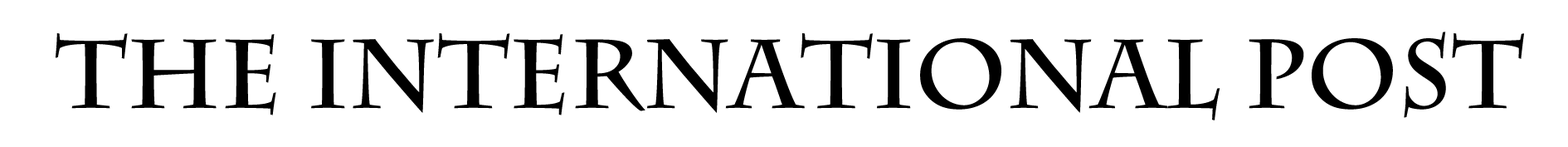
<style>
.page{position:relative;width:1568px;height:147px;background:#ffffff}
.page>*{position:absolute;margin:0}
.t1{font:96.8px "CharlemagneStd-Bold";color:#000000}
</style>
<div class="page">
<p class="t1" style="left:56px;top:32px;width:1468px;height:88px">THE INTERNATIONAL POST</p>
</div>
